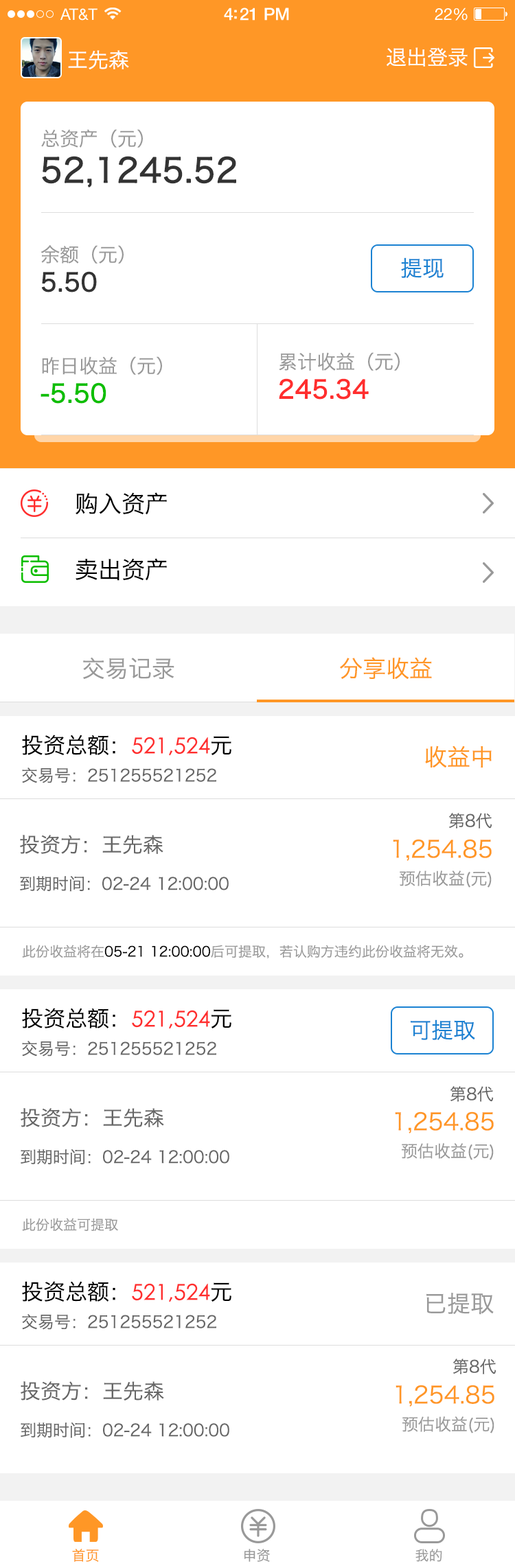
<style>
.page{position:relative;width:515px;height:1568px;background:#ffffff}
.page>*{position:absolute;margin:0}
.t1{font:20.6px "HiraginoSansGB-W3";color:#ffffff}
.t2{font:33px/24.7px "HiraginoSansGB-W3";color:#333333;font-weight:bold}
.t3{font:19.2px/24.7px "HiraginoSansGB-W3";color:#999999}
.t4{font:24.7px/24.7px "HiraginoSansGB-W3";color:#333333;font-weight:bold}
.t5{font:22px "HiraginoSansGB-W3";color:#1b82d2}
.t6{font:24.7px/24.7px "HiraginoSansGB-W3";color:#ff2e2e;font-weight:bold}
.t7{font:24.7px/24.7px "HiraginoSansGB-W3";color:#0dbe00;font-weight:bold}
.t8{font:23.3px "HiraginoSansGB-W3";color:#000000}
.t9{font:23.3px "HiraginoSansGB-W3";color:#999999}
.t10{font:23.3px "HiraginoSansGB-W3";color:#ff9726}
.t11{font:16.5px/41.2px "HiraginoSansGB-W3";color:#666666}
.t12{font:22px/33px "HiraginoSansGB-W3";color:#000000}
.t13{font:22px/33px "CenturyGothic";color:#ff2e2e}
.t14{font:16.5px "HiraginoSansGB-W3";color:#666666}
.t15{font:16.5px/24.7px "HiraginoSansGB-W3";color:#666666}
.t16{font:20.6px/41.2px "HiraginoSansGB-W3";color:#666666}
.t17{font:23.3px/33px "HiraginoSansGB-W3";color:#ff9726}
.t18{font:16.5px/33px "HiraginoSansGB-W3";color:#999999}
.t19{font:13.7px "HiraginoSansGB-W3";color:#999999}
.t20{font:13.7px "HiraginoSansGB-W3";color:#000000}
.t21{font:13.9px "HiraginoSansGB-W3";color:#ff9726}
.t22{font:13.9px "HiraginoSansGB-W3";color:#999999}
</style>
<div class="page">
<p class="t1" style="left:68px;top:50px;width:61px;height:19px">王先森</p>
<p class="t1" style="left:387px;top:47px;width:81px;height:20px">退出登录</p>
<p class="t2" style="left:41px;top:129px;width:195px;height:58px"><span class="t3">总资产（元）<br></span>52,1245.52</p>
<p class="t3" style="left:41px;top:245px;width:83px;height:47px">余额（元）<br><span class="t4">5.50</span></p>
<p class="t5" style="left:401px;top:257px;width:42px;height:21px">提现</p>
<p class="t3" style="left:279px;top:352px;width:121px;height:48px">累计收益（元）<br><span class="t6">245.34</span></p>
<p class="t3" style="left:41px;top:356px;width:121px;height:48px">昨日收益（元）<br><span class="t7">-5.50</span></p>
<p class="t8" style="left:76px;top:492px;width:91px;height:23px">购入资产</p>
<p class="t8" style="left:76px;top:558px;width:91px;height:23px">卖出资产</p>
<p class="t9" style="left:83px;top:657px;width:91px;height:23px">交易记录</p>
<p class="t10" style="left:340px;top:657px;width:92px;height:22px">分享收益</p>
<p class="t11" style="left:22px;top:735px;width:209px;height:48px"><span class="t12">投资总额：</span><span class="t13">521,524</span><span class="t12">元<br></span>交易号：251255521252</p>
<p class="t10" style="left:425px;top:746px;width:67px;height:22px">收益中</p>
<p class="t14" style="left:449px;top:813px;width:43px;height:16px">第8代</p>
<p class="t15" style="left:20px;top:835px;width:209px;height:57px"><span class="t16">投资方：王先森<br></span>到期时间：02-24 12:00:00</p>
<p class="t17" style="left:393px;top:839px;width:99px;height:49px;text-align:right">1,254.85<br><span class="t18">预估收益(元)</span></p>
<p class="t19" style="left:22px;top:945px;width:441px;height:13px">此份收益将在<span class="t20">05-21 12:00:00</span>后可提取，若认购方违约此份收益将无效。</p>
<p class="t11" style="left:22px;top:1008px;width:209px;height:49px"><span class="t12">投资总额：</span><span class="t13">521,524</span><span class="t12">元<br></span>交易号：251255521252</p>
<p class="t5" style="left:411px;top:1019px;width:64px;height:21px">可提取</p>
<p class="t14" style="left:450px;top:1086px;width:44px;height:16px">第8代</p>
<p class="t15" style="left:21px;top:1108px;width:208px;height:57px"><span class="t16">投资方：王先森<br></span>到期时间：02-24 12:00:00</p>
<p class="t17" style="left:395px;top:1111px;width:99px;height:49px;text-align:right">1,254.85<br><span class="t18">预估收益(元)</span></p>
<p class="t19" style="left:22px;top:1218px;width:96px;height:13px">此份收益可提取</p>
<p class="t11" style="left:22px;top:1281px;width:209px;height:49px"><span class="t12">投资总额：</span><span class="t13">521,524</span><span class="t12">元<br></span>交易号：251255521252</p>
<p class="t9" style="left:426px;top:1293px;width:68px;height:22px">已提取</p>
<p class="t14" style="left:453px;top:1359px;width:43px;height:15px">第8代</p>
<p class="t15" style="left:21px;top:1381px;width:208px;height:57px"><span class="t16">投资方：王先森<br></span>到期时间：02-24 12:00:00</p>
<p class="t17" style="left:395px;top:1385px;width:99px;height:48px;text-align:right">1,254.85<br><span class="t18">预估收益(元)</span></p>
<p class="t21" style="left:72px;top:1549px;width:27px;height:13px">首页</p>
<p class="t22" style="left:244px;top:1549px;width:26px;height:13px">申资</p>
<p class="t22" style="left:415px;top:1549px;width:27px;height:13px">我的</p>
</div>
